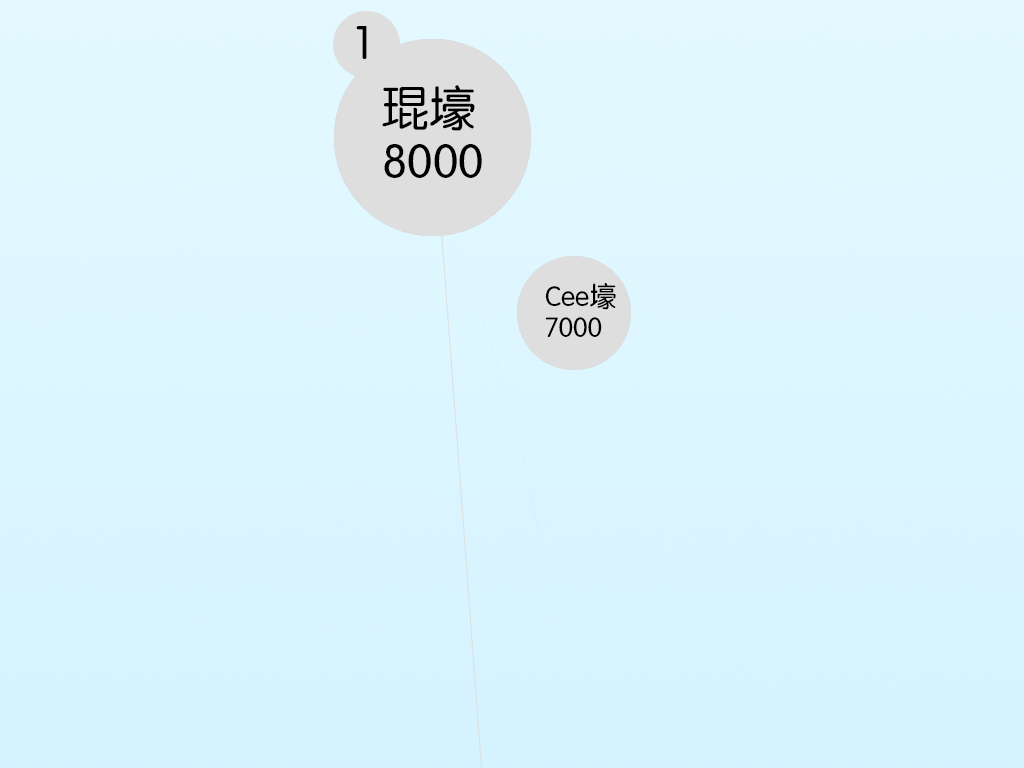
<style>
.page{position:relative;width:1024px;height:768px}
.page>*{position:absolute;margin:0}
.t1{font:46.5px "FZY3JW--GB1-0";color:#000000}
.t2{font:47.5px/52.8px "FZY3JW--GB1-0";color:#000000}
.t3{font:27.5px/30.6px "FZY3JW--GB1-0";color:#000000}
</style>
<div class="page">
<p class="t1" style="left:356px;top:26px;width:11px;height:33px">1</p>
<p class="t2" style="left:382px;top:85px;width:100px;height:93px">琨壕<br>8000</p>
<p class="t3" style="left:545px;top:283px;width:71px;height:54px">Cee壕<br>7000</p>
</div>
